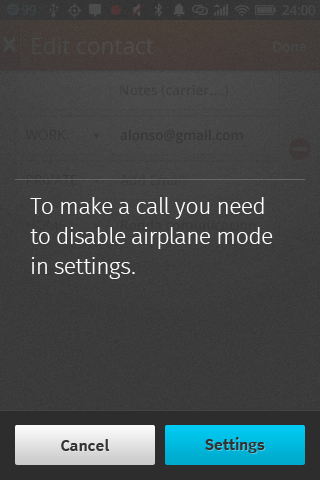
<style>
.page{position:relative;width:320px;height:480px}
.page>*{position:absolute;margin:0}
.t1{font:22.9px/30px "FeuraSansLight";letter-spacing:-0.015em;color:#fbfbfb}
.t2{font:16px "FeuraSans-Medium";color:#333333}
</style>
<div class="page">
<p class="t1" style="left:30px;top:197px;width:243px;height:82px">To make a call you need to disable airplane mode in settings.</p>
<p class="t2" style="left:205px;top:437px;width:60px;height:16px">Settings</p>
<p class="t2" style="left:61px;top:439px;width:49px;height:12px">Cancel</p>
</div>
